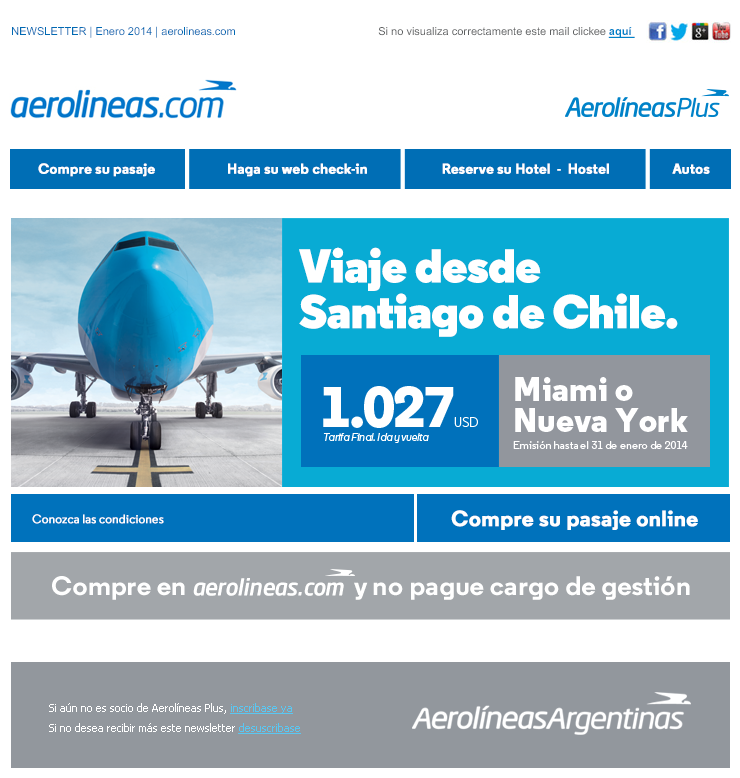
<style>
.page{position:relative;width:740px;height:778px;background:#ffffff}
.page>*{position:absolute;margin:0}
.t1{font:11px "ArialMT";color:#0069b3}
.t2{font:11px "ArialMT";color:#5e6061}
.t3{font:11px "Arial-BoldMT";color:#0082c8;text-decoration:underline}
.t4{font:14.3px "Regular-Bold";color:#ffffff;font-weight:bold}
.t5{font:47.6px/45.9px "Regular-Black";letter-spacing:-0.018em;color:#ffffff}
.t6{font:47.6px "Regular-Black";letter-spacing:-0.018em;color:#ffffff}
.t7{font:22px "Regular-Bold";color:#ffffff;font-weight:bold}
.t8{font:12px "Regular-Medium";color:#ffffff;font-weight:bold}
.t9{font:26.9px "Regular-Bold";letter-spacing:0.005em;color:#ffffff}
.t10{font:22.6px "NeoSans-MediumItalic";letter-spacing:-0.02em;color:#ffffff}
.t11{font:11px "Tahoma";color:#ffffff}
.t12{font:11px "Tahoma";color:#5ac7f2;text-decoration:underline}
</style>
<div class="page">
<p class="t1" style="left:12px;top:26px;width:223px;height:12px">NEWSLETTER | Enero 2014 | aerolineas.com</p>
<p class="t2" style="left:378px;top:27px;width:257px;height:11px">Si no visualiza correctamente este mail clickee <span class="t3">aquí</span></p>
<p class="t4" style="left:38px;top:163px;width:117px;height:14px">Compre su pasaje</p>
<p class="t4" style="left:228px;top:163px;width:139px;height:14px">Haga su web check-in</p>
<p class="t4" style="left:442px;top:163px;width:167px;height:11px">Reserve su Hotel  -  Hostel</p>
<p class="t4" style="left:672px;top:163px;width:38px;height:11px">Autos</p>
<p class="t5" style="left:299px;top:247px;width:379px;height:90px"><span class="t6">Viaje desde<br></span>Santiago de Chile.</p>
<p class="t7" style="left:451px;top:510px;width:247px;height:20px">Compre su pasaje online</p>
<p class="t8" style="left:32px;top:514px;width:132px;height:10px">Conozca las condiciones</p>
<p class="t9" style="left:52px;top:576px;width:638px;height:24px">Compre en                             y no pague cargo de gestión</p>
<p class="t10" style="left:193px;top:578px;width:151px;height:18px">aerolineas.com</p>
<p class="t11" style="left:49px;top:703px;width:244px;height:11px">Si aún no es socio de Aerolíneas Plus, <span class="t12">inscribase ya</span></p>
<p class="t11" style="left:49px;top:723px;width:252px;height:11px">Si no desea recibir más este newsletter <span class="t12">desuscribase</span></p>
</div>
